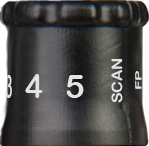
<style>
.page{position:relative;width:149px;height:146px}
.page>*{position:absolute;margin:0}
.t1{font:14.7px "ArialRoundedMTBold";letter-spacing:-0.01em;color:#e1e4e3;scale:1.09 1}
.t2{font:32.5px "ArialRoundedMTBold";letter-spacing:-0.01em;color:#e1e4e3;scale:0.36 1}
.t3{font:32.5px "ArialRoundedMTBold";letter-spacing:-0.01em;color:#e1e4e3;scale:0.93 1}
.t4{font:33.3px "ArialRoundedMTBold";letter-spacing:-0.01em;color:#e1e4e3}
.t5{font:8.8px "ArialRoundedMTBold";letter-spacing:-0.01em;color:#e1e4e3;scale:1.82 1}
</style>
<div class="page">
<p class="t1" style="left:111px;top:58px;width:12px;height:45px;rotate:-90deg">SCAN</p>
<p class="t2" style="left:5px;top:75px;width:7px;height:23px">3</p>
<p class="t3" style="left:25px;top:74px;width:18px;height:24px">4</p>
<p class="t4" style="left:66px;top:75px;width:18px;height:23px">5</p>
<p class="t5" style="left:135px;top:71px;width:7px;height:18px;rotate:-90deg">FP</p>
</div>
